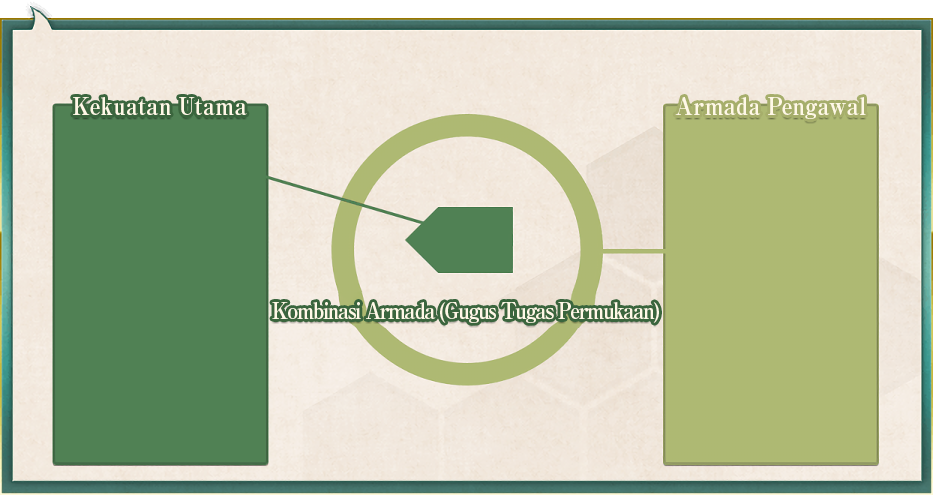
<style>
.page{position:relative;width:933px;height:495px}
.page>*{position:absolute;margin:0}
.t1{font:24px "RyuminPro-ExBold";color:#fff8e7;scale:0.9 1}
.t2{font:22.5px "RyuminPro-ExBold";letter-spacing:-0.08em;color:#fff8e7;scale:0.9 1}
</style>
<div class="page">
<p class="t1" style="left:73px;top:97px;width:174px;height:18px">Kekuatan Utama</p>
<p class="t1" style="left:675px;top:97px;width:191px;height:22px">Armada Pengawal</p>
<p class="t2" style="left:272px;top:302px;width:387px;height:21px">Kombinasi Armada (Gugus Tugas Permukaan)</p>
</div>
